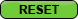
<style>
.page{position:relative;width:78px;height:19px;background:#6fcb37}
.page>*{position:absolute;margin:0}
.t1{font:12px "Arial-BoldMT";color:#000000;text-transform:uppercase}
</style>
<div class="page">
<p class="t1" style="left:19px;top:5px;width:40px;height:9px">Reset</p>
</div>
